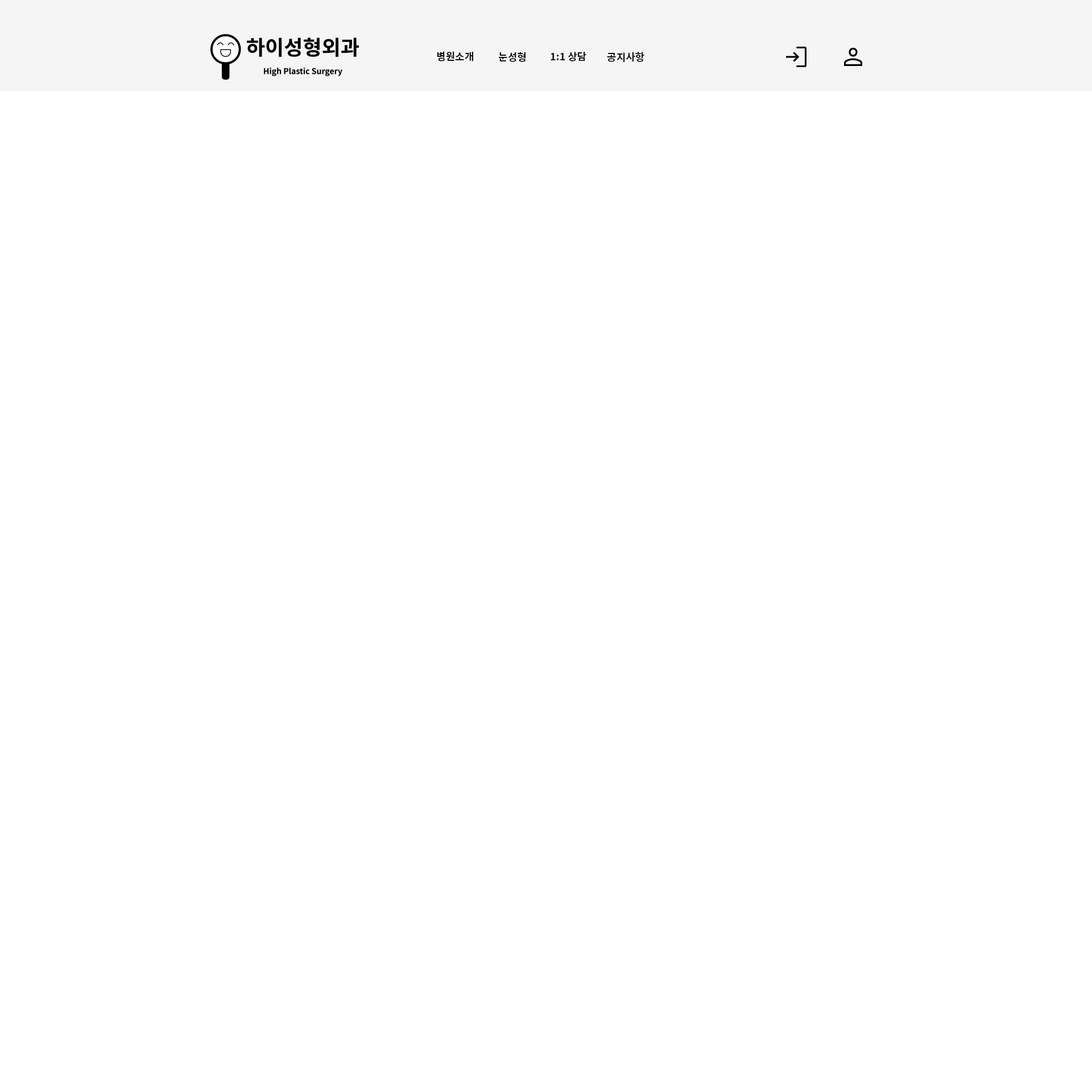
<style>
.page{position:relative;width:1092px;height:1092px;background:#ffffff}
.page>*{position:absolute;margin:0}
.t1{font:10.2px "NotoSansKR-Bold";color:#111111}
</style>
<div class="page">
<p class="t1" style="left:437px;top:51px;width:36px;height:10px">병원소개</p>
<p class="t1" style="left:499px;top:52px;width:27px;height:10px">눈성형</p>
<p class="t1" style="left:551px;top:52px;width:35px;height:9px">1:1 상담</p>
<p class="t1" style="left:607px;top:52px;width:37px;height:10px">공지사항</p>
</div>
